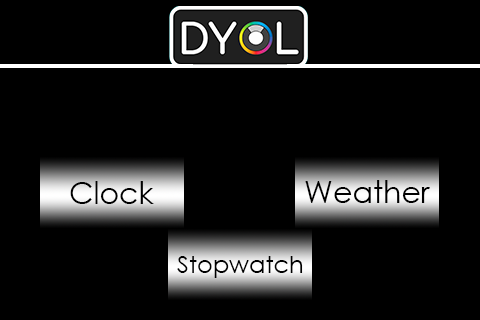
<style>
.page{position:relative;width:480px;height:320px;background:#000000}
.page>*{position:absolute;margin:0}
.t1{font:30px "CenturyGothic";color:#000000}
.t2{font:24px "CenturyGothic";color:#000000}
</style>
<div class="page">
<p class="t1" style="left:70px;top:181px;width:84px;height:23px">Clock</p>
<p class="t1" style="left:305px;top:180px;width:125px;height:23px">Weather</p>
<p class="t2" style="left:177px;top:256px;width:126px;height:22px">Stopwatch</p>
</div>
